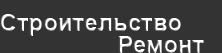
<style>
.page{position:relative;width:222px;height:53px;background:#333333}
.page>*{position:absolute;margin:0}
.t1{font:24px "Arial-BoldMT"}
</style>
<div class="page">
<p class="t1" style="left:0px;top:14px;width:181px;height:22px">Строительство</p>
<p class="t1" style="left:118px;top:36px;width:86px;height:17px">Ремонт</p>
</div>
